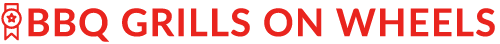
<style>
.page{position:relative;width:500px;height:44px;background:#ffffff}
.page>*{position:absolute;margin:0}
.t1{font:38px "Lato-Bold";letter-spacing:0.035em;color:#e9241e;text-transform:uppercase}
</style>
<div class="page">
<p class="t1" style="left:28px;top:8px;width:467px;height:34px">BBQ Grills On Wheels</p>
</div>
